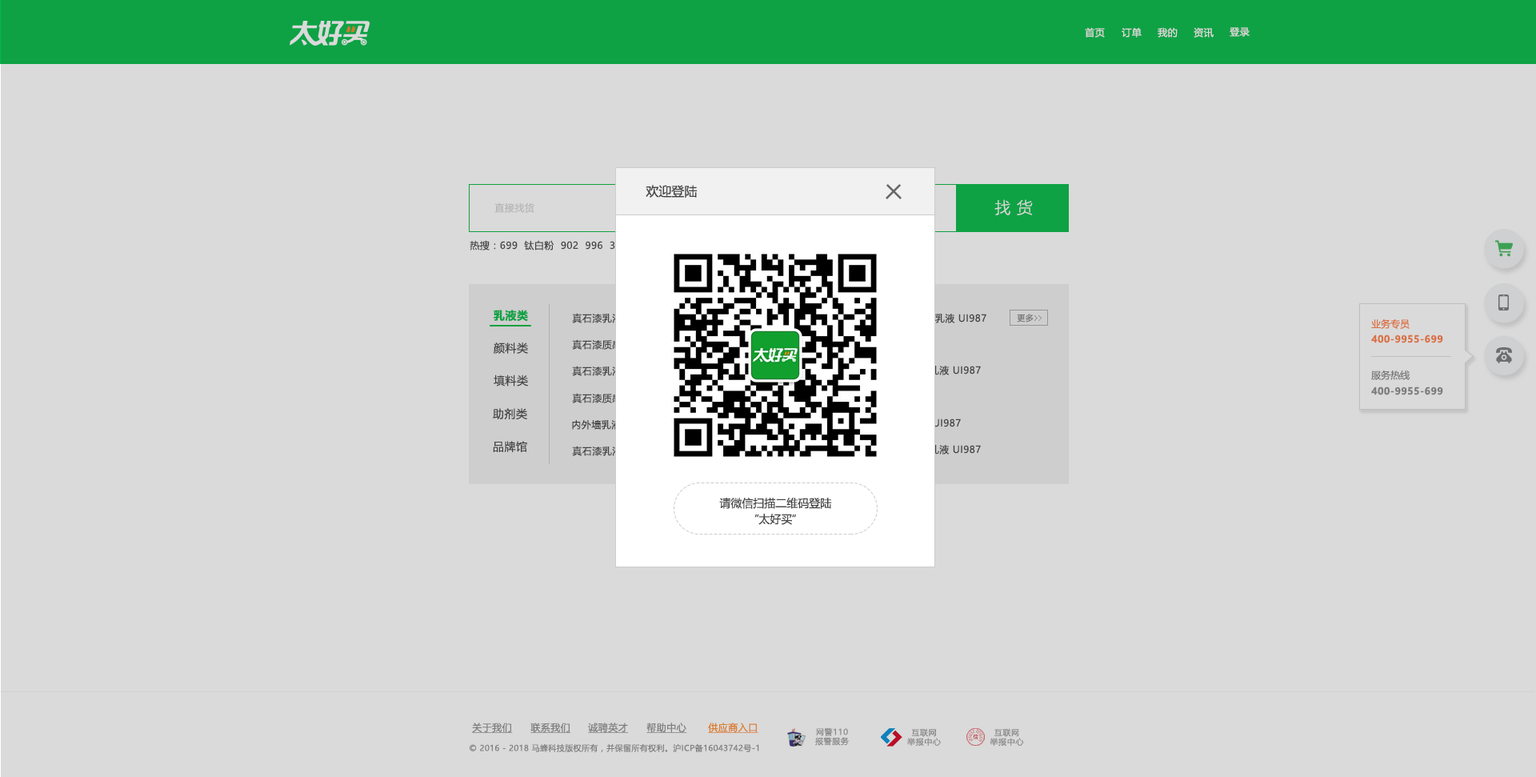
<style>
.page{position:relative;width:1536px;height:777px;background:#dadada}
.page>*{position:absolute;margin:0}
.t1{font:9.6px "MicrosoftYaHeiUI";letter-spacing:0.04em;color:#dadada}
.t2{font:12.8px "MicrosoftYaHeiUI";color:#444444}
.t3{font:9.6px "MicrosoftYaHeiUI";letter-spacing:0.04em;color:#b6b6b6}
.t4{font:16px "MicrosoftYaHeiUILight";letter-spacing:0.04em;color:#dadada}
.t5{font:9.6px "MicrosoftYaHeiUI";letter-spacing:0.04em;color:#444444}
.t6{font:11.2px "MicrosoftYaHeiUI-Bold";letter-spacing:0.04em;color:#00b945}
.t7{font:9.6px "MicrosoftYaHeiUI";letter-spacing:0.04em}
.t8{font:8px "MicrosoftYaHeiUI";letter-spacing:0.04em;color:#848484}
.t9{font:8px "FangSong";letter-spacing:0.04em;color:#848484}
.t10{font:9.6px "MicrosoftYaHeiUI";color:#da7042}
.t11{font:9.6px "MicrosoftYaHeiUI-Bold";letter-spacing:0.04em;color:#da7042}
.t12{font:11.2px "MicrosoftYaHeiUI";letter-spacing:0.04em;color:#424242}
.t13{font:9.6px "MicrosoftYaHeiUI";color:#888888}
.t14{font:9.6px "MicrosoftYaHeiUI-Bold";letter-spacing:0.04em;color:#888888}
.t15{font:9.6px "MicrosoftYaHeiUI";letter-spacing:0.04em;color:#424242}
.t16{font:11.2px/16px "MicrosoftYaHeiUI";color:#444444}
.t17{font:9.6px "MicrosoftYaHeiUI";letter-spacing:0.04em;color:#8c8c8c;text-decoration:underline}
.t18{font:9.6px "MicrosoftYaHeiUI";letter-spacing:0.04em;color:#da7d2b;text-decoration:underline}
.t19{font:8px/9.3px "MicrosoftYaHei";letter-spacing:0.06em;color:#999999}
.t20{font:8px "MicrosoftYaHeiUI";letter-spacing:0.04em;color:#8c8c8c}
</style>
<div class="page">
<p class="t1" style="left:1084px;top:27px;width:20px;height:11px">首页</p>
<p class="t1" style="left:1121px;top:27px;width:20px;height:11px">订单</p>
<p class="t1" style="left:1157px;top:27px;width:20px;height:11px">我的</p>
<p class="t1" style="left:1193px;top:27px;width:20px;height:11px">资讯</p>
<p class="t1" style="left:1229px;top:27px;width:20px;height:10px">登录</p>
<p class="t2" style="left:645px;top:185px;width:52px;height:13px">欢迎登陆</p>
<p class="t3" style="left:494px;top:202px;width:40px;height:11px">直接找货</p>
<p class="t4" style="left:994px;top:199px;width:38px;height:16px">找 货</p>
<p class="t5" style="left:469px;top:240px;width:245px;height:10px">热搜：699  钛白粉  902  996  312  666  重钙  佰利联</p>
<p class="t6" style="left:493px;top:310px;width:35px;height:12px">乳液类</p>
<p class="t7" style="left:572px;top:313px;width:82px;height:10px">真石漆乳液 R-987</p>
<p class="t7" style="left:905px;top:313px;width:81px;height:10px">内外墙乳液 UI987</p>
<p class="t8" style="left:1016px;top:314px;width:25px;height:8px">更多<span class="t9">&gt;&gt;</span></p>
<p class="t10" style="left:1371px;top:318px;width:38px;height:11px">业务专员</p>
<p class="t11" style="left:1371px;top:334px;width:72px;height:9px">400-9955-699</p>
<p class="t12" style="left:493px;top:342px;width:35px;height:11px">颜料类</p>
<p class="t7" style="left:572px;top:365px;width:82px;height:11px">真石漆乳液 R-987</p>
<p class="t7" style="left:900px;top:365px;width:80px;height:10px">内外墙乳液 UI987</p>
<p class="t12" style="left:493px;top:374px;width:35px;height:12px">填料类</p>
<p class="t13" style="left:1371px;top:369px;width:38px;height:11px">服务热线</p>
<p class="t14" style="left:1371px;top:386px;width:72px;height:9px">400-9955-699</p>
<p class="t12" style="left:493px;top:408px;width:34px;height:12px">助剂类</p>
<p class="t15" style="left:572px;top:419px;width:81px;height:10px">内外墙乳液 UI987</p>
<p class="t12" style="left:493px;top:441px;width:34px;height:11px">品牌馆</p>
<p class="t7" style="left:572px;top:445px;width:82px;height:11px">真石漆乳液 R-987</p>
<p class="t7" style="left:900px;top:444px;width:80px;height:10px">内外墙乳液 UI987</p>
<p class="t16" style="left:719px;top:497px;width:113px;height:28px;text-align:center">请微信扫描二维码登陆<br>”太好买“</p>
<p class="t17" style="left:472px;top:722px;width:41px;height:11px">关于我们</p>
<p class="t17" style="left:530px;top:722px;width:41px;height:11px">联系我们</p>
<p class="t17" style="left:588px;top:722px;width:41px;height:11px">诚聘英才</p>
<p class="t17" style="left:646px;top:722px;width:41px;height:11px">帮助中心</p>
<p class="t18" style="left:708px;top:722px;width:50px;height:11px">供应商入口</p>
<p class="t19" style="left:815px;top:727px;width:34px;height:18px;text-align:center">网警110<br>报警服务</p>
<p class="t19" style="left:907px;top:728px;width:34px;height:17px;text-align:center">互联网<br>举报中心</p>
<p class="t19" style="left:989px;top:728px;width:35px;height:17px;text-align:center">互联网<br>举报中心</p>
<p class="t20" style="left:469px;top:743px;width:290px;height:9px">© 2016 - 2018 马蜂科技版权所有，并保留所有权利。沪ICP备16043742号-1</p>
</div>
